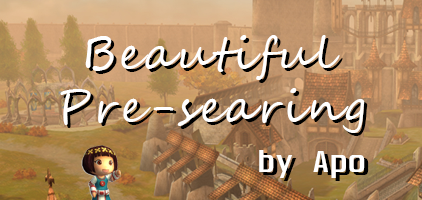
<style>
.page{position:relative;width:422px;height:200px}
.page>*{position:absolute;margin:0}
.t1{font:45px "SegoeScript";letter-spacing:0.06em;color:#ffffff}
.t2{font:45px "SegoeScript";letter-spacing:0.06em;color:#000000}
.t3{font:27px "Unispace-Bold";letter-spacing:0.06em;color:#ffffff}
.t4{font:27px "Unispace-Bold";letter-spacing:0.06em;color:#000000}
</style>
<div class="page">
<p class="t1" style="left:85px;top:35px;width:255px;height:45px">Beautiful</p>
<p class="t2" style="left:88px;top:38px;width:255px;height:45px">Beautiful</p>
<p class="t1" style="left:60px;top:88px;width:305px;height:45px">Pre-searing</p>
<p class="t2" style="left:63px;top:91px;width:305px;height:45px">Pre-searing</p>
<p class="t3" style="left:259px;top:150px;width:106px;height:28px">by Apo</p>
<p class="t4" style="left:263px;top:153px;width:106px;height:28px">by Apo</p>
</div>
